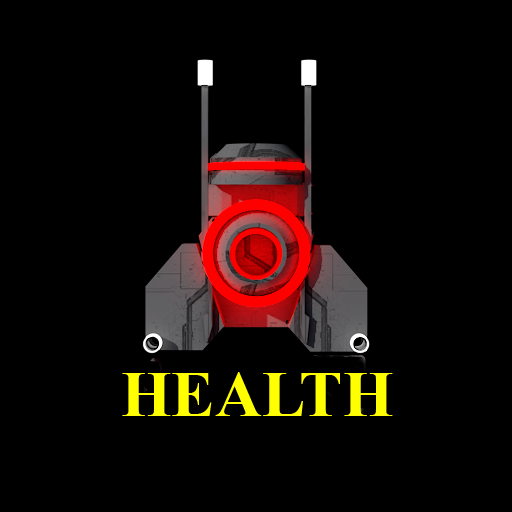
<style>
.page{position:relative;width:512px;height:512px;background:#000000}
.page>*{position:absolute;margin:0}
.t1{font:65px "TimesNewRomanPS-BoldMT";color:#ffff00}
</style>
<div class="page">
<p class="t1" style="left:122px;top:372px;width:271px;height:44px">HEALTH</p>
</div>
